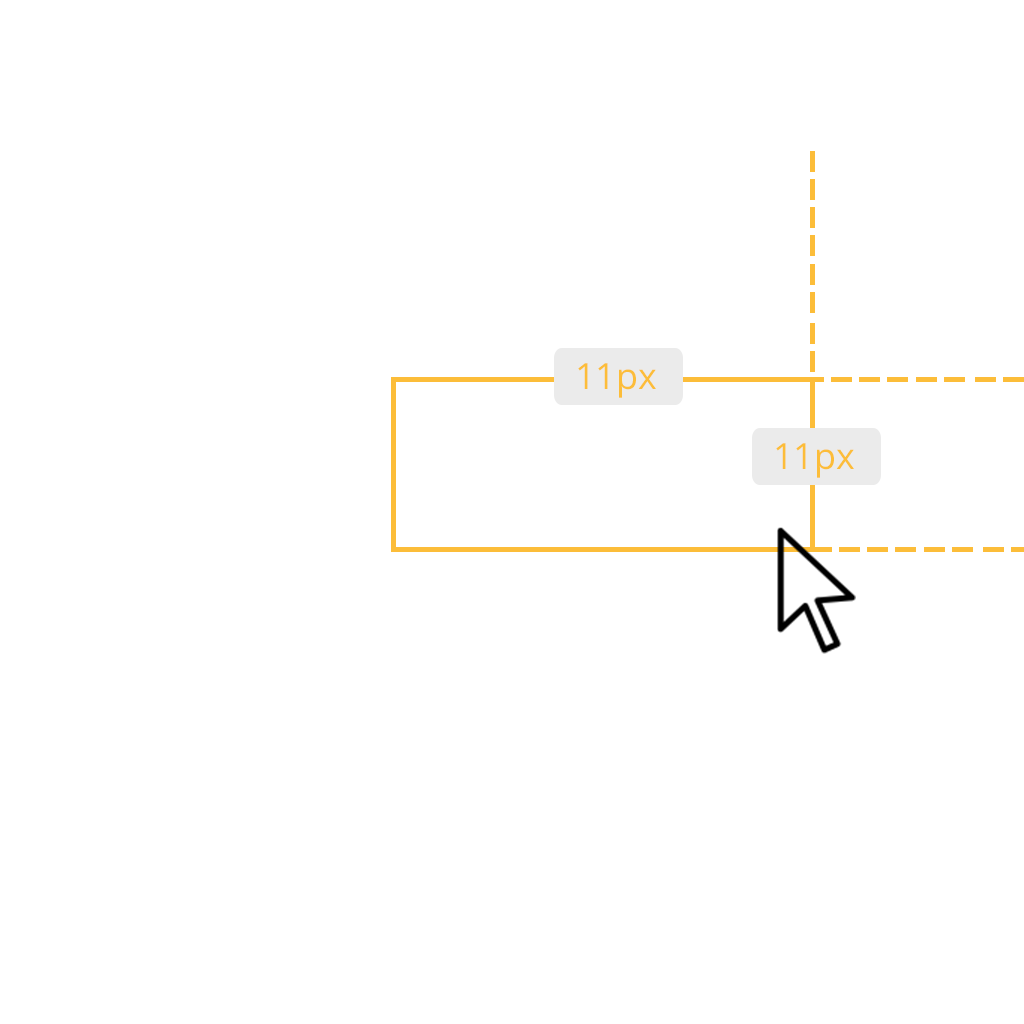
<style>
.page{position:relative;width:1024px;height:1024px;background:#ffffff}
.page>*{position:absolute;margin:0}
.t1{font:36px "OpenSans";color:#fcbd39}
</style>
<div class="page">
<p class="t1" style="left:578px;top:363px;width:78px;height:35px">11px</p>
<p class="t1" style="left:776px;top:443px;width:78px;height:35px">11px</p>
</div>
